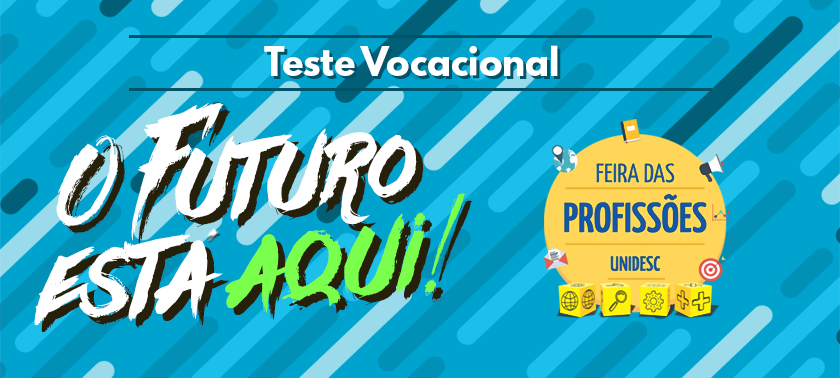
<style>
.page{position:relative;width:840px;height:378px;background:#00a3ce}
.page>*{position:absolute;margin:0}
.t1{font:35.2px "LeagueSpartan-Bold";color:#ffffff}
.t2{font:125.5px/91.7px "Againts";color:#ffffff}
.t3{font:125.5px/91.7px "Againts";color:#7bff4d}
.t4{font:125.5px/91.7px "Againts"}
</style>
<div class="page">
<p class="t1" style="left:264px;top:45px;width:294px;height:31px">Teste Vocacional</p>
<p class="t2" style="left:34px;top:102px;width:432px;height:224px;text-align:center;rotate:-5deg">O Futuro<br>esta <span class="t3">aqui!</span></p>
<p class="t4" style="left:41px;top:109px;width:432px;height:224px;text-align:center;rotate:-5deg">O Futuro<br>esta aqui!</p>
</div>
